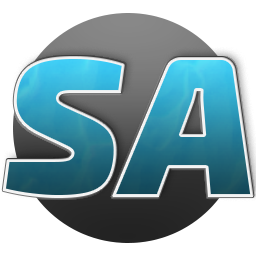
<style>
.page{position:relative;width:256px;height:256px;background:#ffffff}
.page>*{position:absolute;margin:0}
.t1{font:200px "Exo2-BlackItalic"}
</style>
<div class="page">
<p class="t1" style="left:3px;top:57px;width:250px;height:140px">SA</p>
</div>
